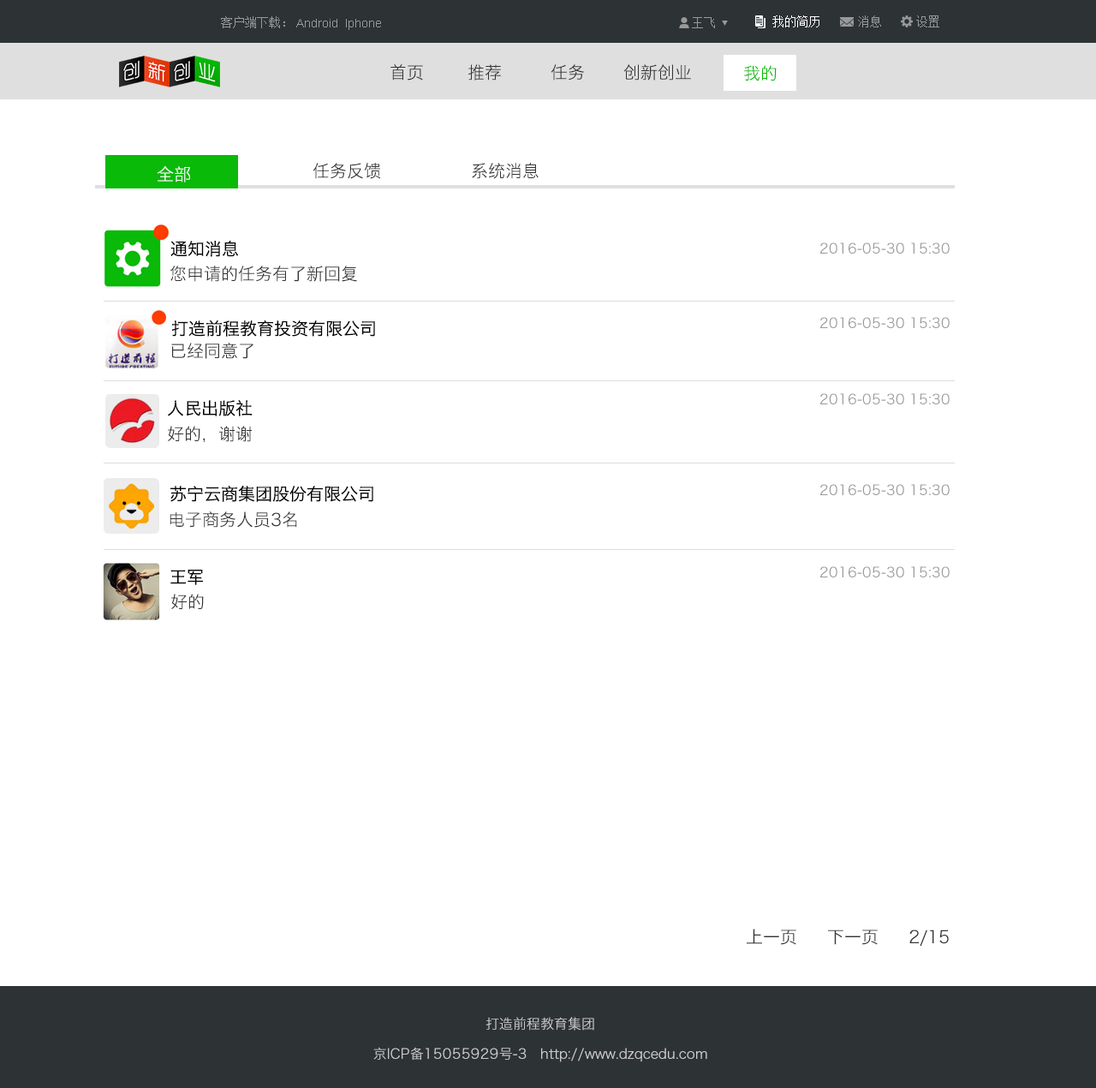
<style>
.page{position:relative;width:1096px;height:1088px;background:#ffffff}
.page>*{position:absolute;margin:0}
.t1{font:12px "SimSun";color:#999999}
.t2{font:12px "SimSun";color:#ffffff}
.t3{font:12px "ArialMT";color:#999999}
.t4{font:17.1px "HiraginoSansGB-W3";color:#333333}
.t5{font:17.1px "HiraginoSansGB-W3";color:#09ba08}
.t6{font:17.1px "HiraginoSansGB-W3";color:#ffffff}
.t7{font:17.1px "HiraginoSansGB-W3";color:#000000}
.t8{font:13.7px "HiraginoSansGB-W3";color:#999999}
.t9{font:13.7px "HiraginoSansGB-W3";color:#cccccc}
</style>
<div class="page">
<p class="t1" style="left:221px;top:16px;width:64px;height:12px">客户端下载：</p>
<p class="t1" style="left:692px;top:17px;width:23px;height:11px">王飞</p>
<p class="t2" style="left:773px;top:15px;width:47px;height:12px">我的简历</p>
<p class="t1" style="left:858px;top:15px;width:23px;height:12px">消息</p>
<p class="t1" style="left:916px;top:15px;width:24px;height:12px">设置</p>
<p class="t3" style="left:296px;top:19px;width:85px;height:11px">Android  Iphone</p>
<p class="t4" style="left:391px;top:64px;width:32px;height:17px">首页</p>
<p class="t4" style="left:468px;top:64px;width:33px;height:17px">推荐</p>
<p class="t4" style="left:551px;top:64px;width:33px;height:17px">任务</p>
<p class="t4" style="left:624px;top:64px;width:67px;height:17px">创新创业</p>
<p class="t5" style="left:744px;top:65px;width:33px;height:16px">我的</p>
<p class="t6" style="left:157px;top:165px;width:33px;height:17px">全部</p>
<p class="t4" style="left:313px;top:163px;width:226px;height:16px">任务反馈               系统消息</p>
<p class="t7" style="left:170px;top:241px;width:68px;height:16px">通知消息</p>
<p class="t8" style="left:820px;top:242px;width:130px;height:12px">2016-05-30 15:30</p>
<p class="t4" style="left:170px;top:266px;width:187px;height:16px">您申请的任务有了新回复</p>
<p class="t8" style="left:820px;top:317px;width:130px;height:11px">2016-05-30 15:30</p>
<p class="t7" style="left:171px;top:320px;width:204px;height:17px">打造前程教育投资有限公司</p>
<p class="t4" style="left:171px;top:343px;width:83px;height:16px">已经同意了</p>
<p class="t7" style="left:168px;top:400px;width:85px;height:16px">人民出版社</p>
<p class="t8" style="left:820px;top:393px;width:130px;height:11px">2016-05-30 15:30</p>
<p class="t4" style="left:168px;top:426px;width:84px;height:17px">好的，谢谢</p>
<p class="t7" style="left:170px;top:486px;width:203px;height:16px">苏宁云商集团股份有限公司</p>
<p class="t8" style="left:820px;top:484px;width:130px;height:11px">2016-05-30 15:30</p>
<p class="t4" style="left:170px;top:511px;width:127px;height:17px">电子商务人员3名</p>
<p class="t7" style="left:170px;top:570px;width:33px;height:15px">王军</p>
<p class="t8" style="left:820px;top:566px;width:130px;height:11px">2016-05-30 15:30</p>
<p class="t4" style="left:171px;top:594px;width:33px;height:15px">好的</p>
<p class="t4" style="left:747px;top:928px;width:202px;height:18px">上一页     下一页     2/15</p>
<p class="t9" style="left:486px;top:1017px;width:108px;height:13px">打造前程教育集团</p>
<p class="t9" style="left:373px;top:1047px;width:334px;height:15px">京ICP备15055929号-3   http://www.dzqcedu.com</p>
</div>
